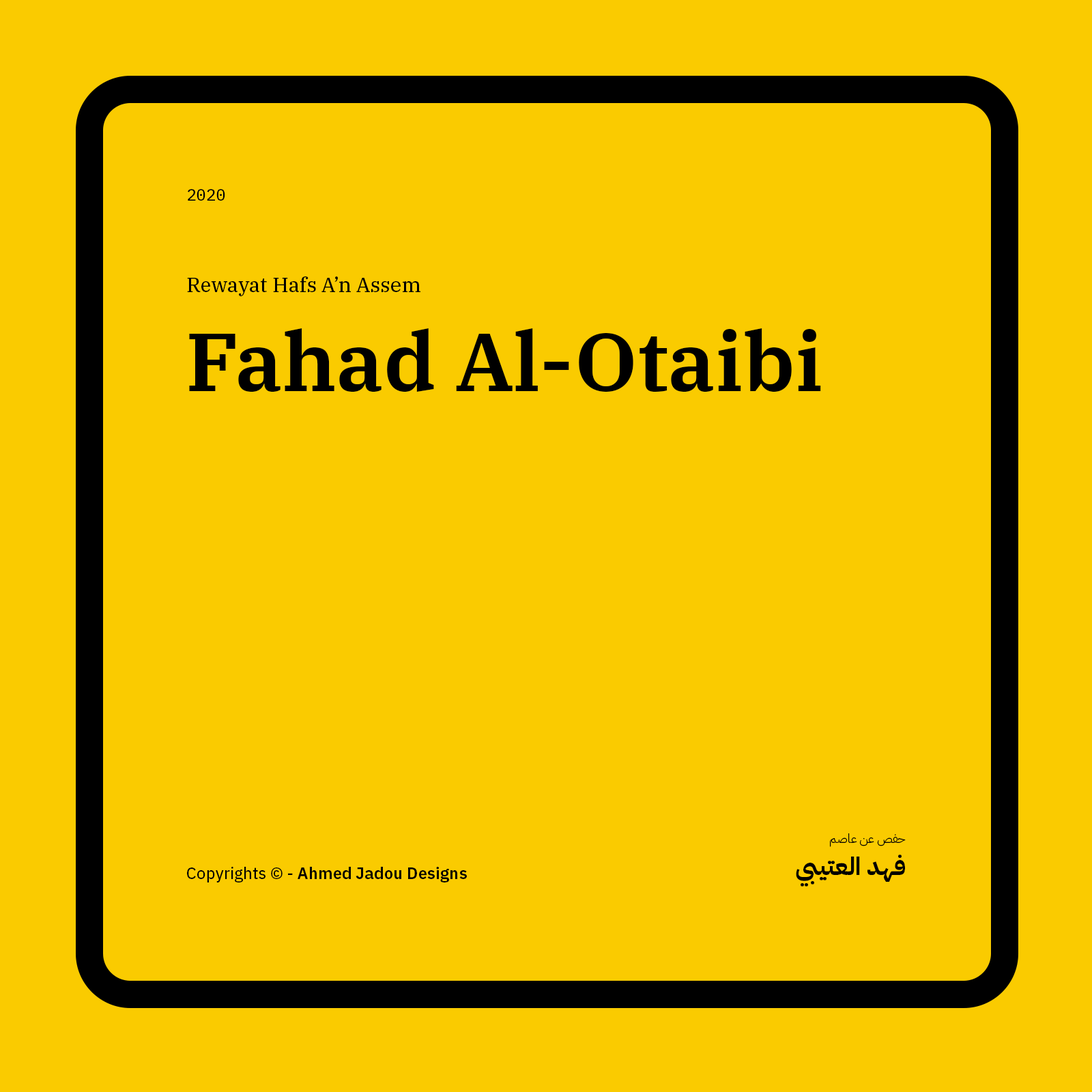
<style>
.page{position:relative;width:1092px;height:1092px;background:#facb00}
.page>*{position:absolute;margin:0}
.t1{font:16.4px "IBMPlexMono-Text";color:#000000}
.t2{font:20.5px "IBMPlexSerif-Text";color:#000000}
.t3{font:81.9px "IBMPlexSerif-SemiBold";color:#000000}
.t4{font:12.3px "IBMPlexArabic-Light";color:#000000}
.t5{font:24.6px "IBMPlexArabic-Bold";color:#000000}
.t6{font:16.4px "IBMPlexSans-SemiBold";color:#000000}
.t7{font:16.4px "IBMPlexSans-Text";color:#000000}
</style>
<div class="page">
<p class="t1" style="left:188px;top:189px;width:37px;height:12px">2020</p>
<p class="t2" style="left:187px;top:276px;width:233px;height:20px">Rewayat Hafs A’n Assem</p>
<p class="t3" style="left:189px;top:328px;width:632px;height:64px">Fahad Al-Otaibi</p>
<p class="t4" style="left:830px;top:833px;width:76px;height:14px">حفص عن عاصم</p>
<p class="t5" style="left:796px;top:854px;width:109px;height:33px">فهد العتيبي</p>
<p class="t6" style="left:187px;top:867px;width:280px;height:15px"><span class="t7">Copyrights © - </span>Ahmed Jadou Designs</p>
</div>
